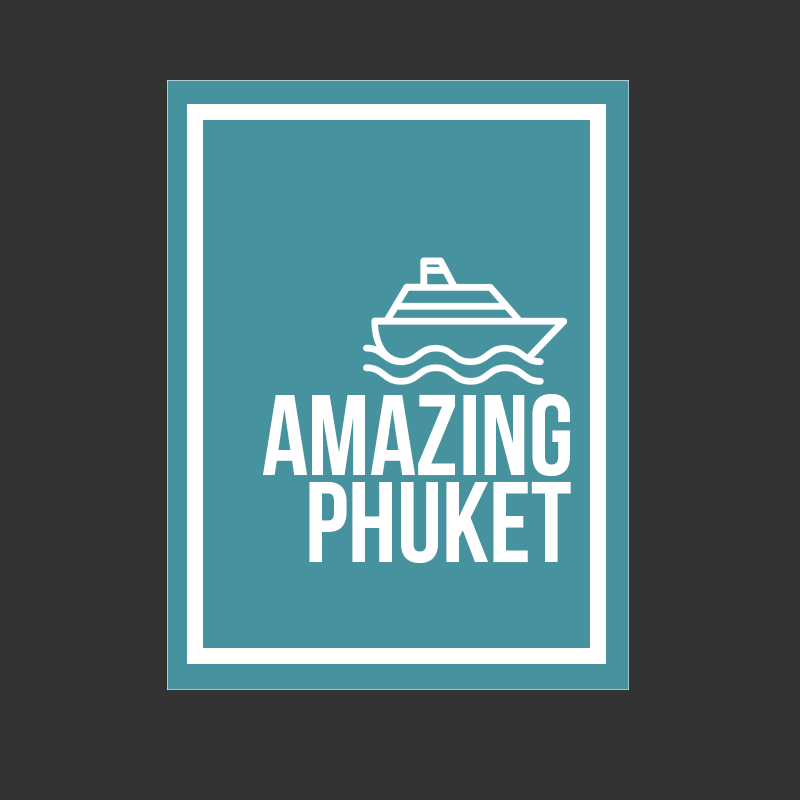
<style>
.page{position:relative;width:800px;height:800px;background:#333333}
.page>*{position:absolute;margin:0}
.t1{font:114px "BebasNeue";color:#ffffff}
</style>
<div class="page">
<p class="t1" style="left:263px;top:393px;width:307px;height:84px">AMAZING</p>
<p class="t1" style="left:309px;top:481px;width:262px;height:83px">PHUKET</p>
</div>
